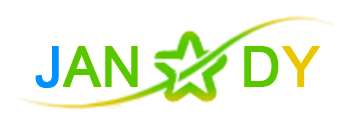
<style>
.page{position:relative;width:358px;height:122px;background:#ffffff}
.page>*{position:absolute;margin:0}
.t1{font:55px "ArialMT";color:#59c700;font-weight:bold}
.t2{font:55px "ArialMT";color:#0090ff;font-weight:bold}
.t3{font:55px "ArialMT";color:#e9c601;font-weight:bold}
</style>
<div class="page">
<p class="t1" style="left:35px;top:46px;width:103px;height:42px"><span class="t2">J</span>AN</p>
<p class="t1" style="left:244px;top:46px;width:76px;height:41px">D<span class="t3">Y</span></p>
</div>
